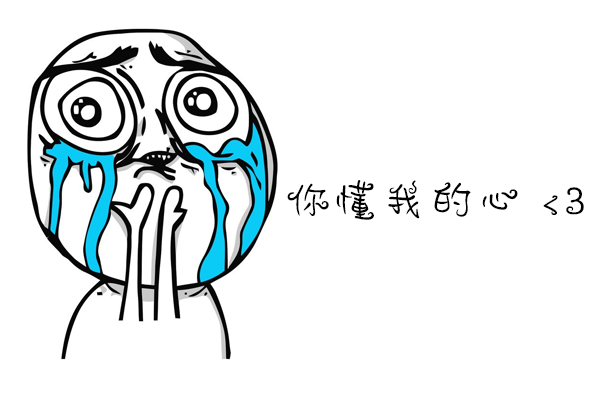
<style>
.page{position:relative;width:600px;height:400px;background:#ffffff}
.page>*{position:absolute;margin:0}
.t1{font:48px "DFMo-W4-WINP-BF";color:#000000}
</style>
<div class="page">
<p class="t1" style="left:287px;top:180px;width:297px;height:40px">你懂我的心 &lt;3</p>
</div>
